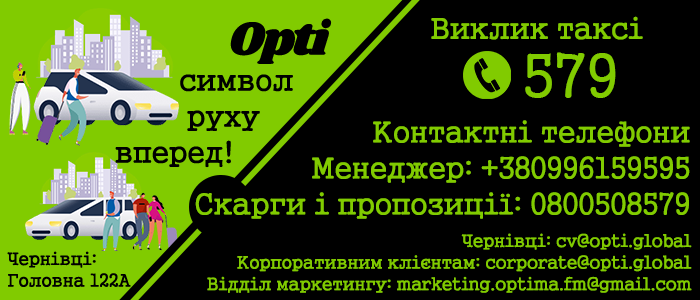
<style>
.page{position:relative;width:700px;height:300px;background:#000000}
.page>*{position:absolute;margin:0}
.t1{font:30px "Gungsuh";letter-spacing:-0.05em;color:#81cb00}
.t2{font:30px "Gungsuh";letter-spacing:-0.05em;color:#000000}
.t3{font:48px "Shrikhand-Regular";letter-spacing:-0.05em;color:#000000}
.t4{font:60px "Gungsuh";letter-spacing:-0.05em;color:#81cb00}
.t5{font:18px "Gungsuh";letter-spacing:-0.05em;color:#81cb00}
.t6{font:18px "Gungsuh";letter-spacing:-0.05em;color:#000000}
</style>
<div class="page">
<p class="t1" style="left:431px;top:16px;width:212px;height:24px">Виклик таксі</p>
<p class="t2" style="left:115px;top:18px;width:217px;height:150px"><span class="t3"> Opti<br></span>символ    <br>руху        <br>вперед!</p>
<p class="t4" style="left:525px;top:52px;width:91px;height:46px">579</p>
<p class="t1" style="left:195px;top:120px;width:495px;height:99px">Контактні телефони<br>Менеджер: +380996159595<br>Скарги і пропозиції: 0800508579</p>
<p class="t5" style="left:207px;top:233px;width:485px;height:60px">Чернівці: cv@opti.global<br>Корпоративним клієнтам: corporate@opti.global<br>Відділ маркетингу: marketing.optima.fm@gmail.com</p>
<p class="t6" style="left:7px;top:251px;width:124px;height:36px;text-align:right">Чернівці: <br>Головна 122А</p>
</div>
